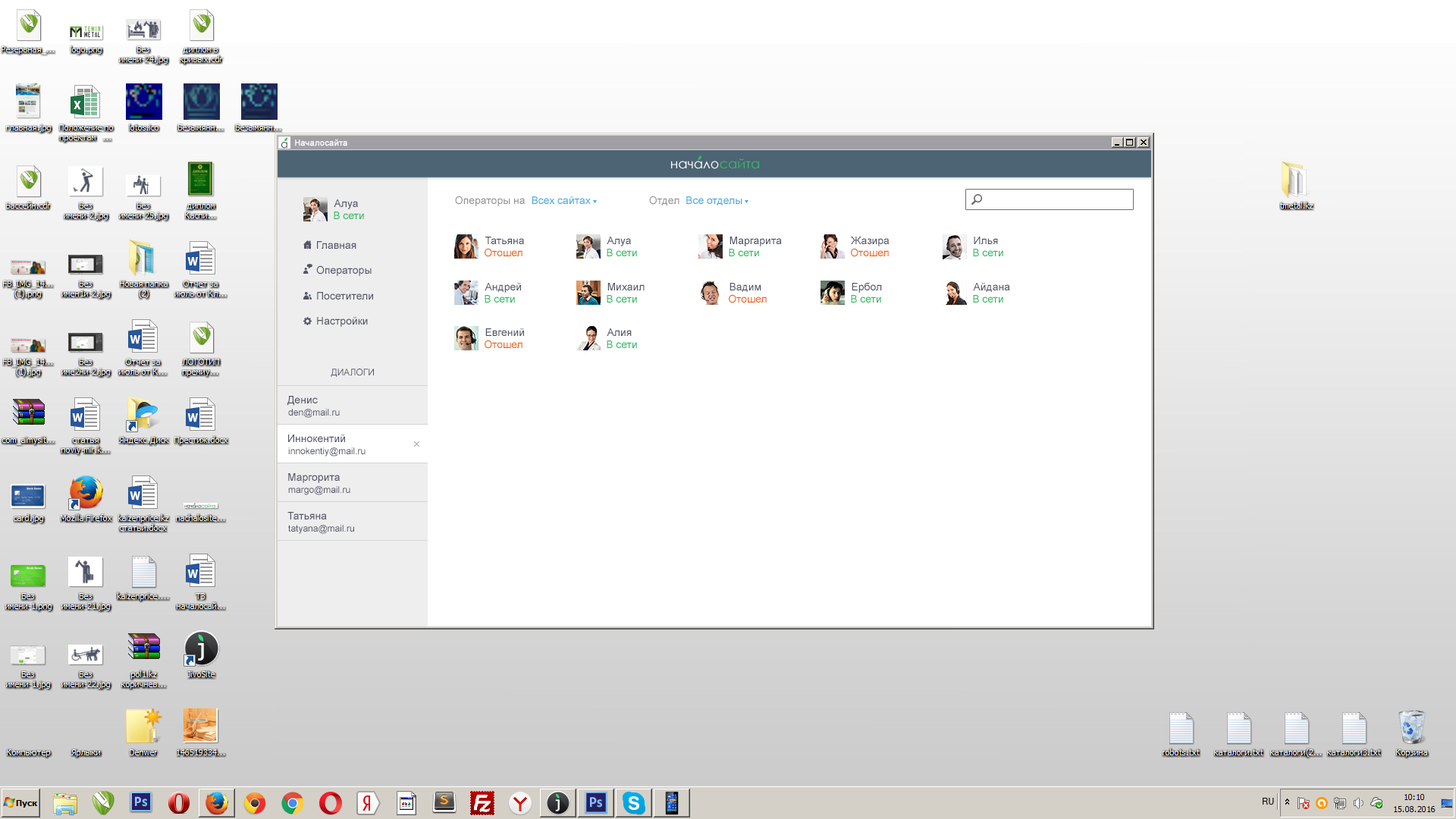
<style>
.page{position:relative;width:1456px;height:819px;background:#ffffff}
.page>*{position:absolute;margin:0}
.t1{font:10.9px "CenturyGothic";color:#3f414d;scale:0.95 1}
.t2{font:8.3px "ArialMT";color:#ffffff;font-weight:bold}
.t3{font:13.3px "CenturyGothic";color:#ffffff}
.t4{font:13.3px "CenturyGothic";color:#34ba65}
.t5{font:10.6px "ArialMT";color:#959595}
.t6{font:10.6px "ArialMT";color:#4ba9df}
.t7{font:10.6px "ArialMT";color:#515567}
.t8{font:10.6px "ArialMT";color:#34ba65}
.t9{font:10.6px "ArialMT";color:#eb6821}
.t10{font:9.1px "ArialMT";color:#515567}
</style>
<div class="page">
<p class="t1" style="left:281px;top:142px;width:6px;height:7px">а</p>
<p class="t2" style="left:295px;top:139px;width:52px;height:7px">Началосайта</p>
<p class="t3" style="left:671px;top:158px;width:88px;height:11px">начало<span class="t4">сайта</span></p>
<p class="t5" style="left:455px;top:196px;width:136px;height:10px">Операторы на<span class="t6">  Всех сайтах</span></p>
<p class="t6" style="left:649px;top:196px;width:93px;height:10px"><span class="t5">Отдел</span>  Все отделы</p>
<p class="t7" style="left:334px;top:199px;width:24px;height:10px">Алуа</p>
<p class="t8" style="left:334px;top:212px;width:30px;height:7px">В сети</p>
<p class="t7" style="left:316px;top:241px;width:57px;height:86px">Главная<br><br>Операторы<br><br>Посетители<br><br>Настройки</p>
<p class="t7" style="left:485px;top:237px;width:39px;height:7px">Татьяна</p>
<p class="t7" style="left:607px;top:237px;width:24px;height:9px">Алуа</p>
<p class="t7" style="left:730px;top:237px;width:52px;height:9px">Маргарита</p>
<p class="t7" style="left:851px;top:237px;width:39px;height:9px">Жазира</p>
<p class="t7" style="left:974px;top:237px;width:24px;height:7px">Илья</p>
<p class="t9" style="left:485px;top:248px;width:37px;height:9px">Отошел</p>
<p class="t8" style="left:607px;top:249px;width:30px;height:7px">В сети</p>
<p class="t8" style="left:729px;top:249px;width:30px;height:7px">В сети</p>
<p class="t9" style="left:851px;top:248px;width:38px;height:9px">Отошел</p>
<p class="t8" style="left:973px;top:249px;width:30px;height:7px">В сети</p>
<p class="t7" style="left:485px;top:282px;width:36px;height:11px">Андрей</p>
<p class="t7" style="left:607px;top:283px;width:38px;height:7px">Михаил</p>
<p class="t7" style="left:730px;top:283px;width:31px;height:9px">Вадим</p>
<p class="t7" style="left:852px;top:282px;width:30px;height:11px">Ербол</p>
<p class="t7" style="left:973px;top:282px;width:37px;height:10px">Айдана</p>
<p class="t8" style="left:485px;top:295px;width:30px;height:8px">В сети</p>
<p class="t8" style="left:607px;top:295px;width:30px;height:8px">В сети</p>
<p class="t9" style="left:729px;top:294px;width:38px;height:9px">Отошел</p>
<p class="t8" style="left:851px;top:295px;width:30px;height:8px">В сети</p>
<p class="t8" style="left:973px;top:295px;width:30px;height:8px">В сети</p>
<p class="t7" style="left:485px;top:328px;width:39px;height:8px">Евгений</p>
<p class="t7" style="left:607px;top:328px;width:25px;height:8px">Алия</p>
<p class="t9" style="left:485px;top:340px;width:37px;height:9px">Отошел</p>
<p class="t8" style="left:607px;top:340px;width:30px;height:8px">В сети</p>
<p class="t10" style="left:331px;top:369px;width:43px;height:8px">ДИАЛОГИ</p>
<p class="t7" style="left:287px;top:396px;width:31px;height:10px">Денис</p>
<p class="t10" style="left:288px;top:409px;width:52px;height:9px">den@mail.ru</p>
<p class="t7" style="left:288px;top:434px;width:57px;height:8px">Иннокентий</p>
<p class="t10" style="left:288px;top:447px;width:78px;height:10px">innokentiy@mail.ru</p>
<p class="t7" style="left:288px;top:473px;width:52px;height:10px">Маргорита</p>
<p class="t10" style="left:288px;top:486px;width:62px;height:9px">margo@mail.ru</p>
<p class="t7" style="left:287px;top:512px;width:40px;height:7px">Татьяна</p>
<p class="t10" style="left:288px;top:525px;width:66px;height:9px">tatyana@mail.ru</p>
</div>
